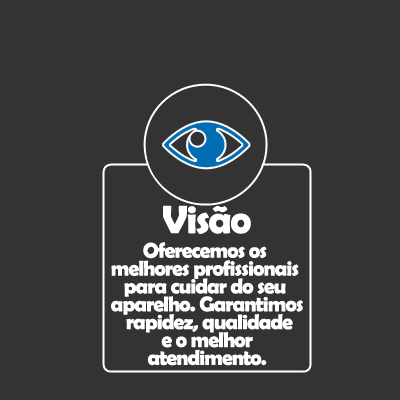
<style>
.page{position:relative;width:400px;height:400px;background:#333333}
.page>*{position:absolute;margin:0}
.t1{font:40px "BerlinSansFBDemi-Bold";letter-spacing:-0.04em;color:#ffffff}
.t2{font:21.3px/17.9px "BerlinSansFBDemi-Bold";letter-spacing:-0.04em;color:#ffffff}
.t3{font:24px/17.9px "BerlinSansFBDemi-Bold";letter-spacing:-0.04em;color:#ffffff}
</style>
<div class="page">
<p class="t1" style="left:163px;top:205px;width:88px;height:29px">Visão</p>
<p class="t2" style="left:111px;top:242px;width:192px;height:124px;text-align:center"><span class="t3"><br></span>Oferecemos os <br>melhores profissionais <br>para cuidar do seu <br>aparelho. Garantimos<br> rapidez, qualidade<br> e o melhor <br>atendimento.</p>
</div>
